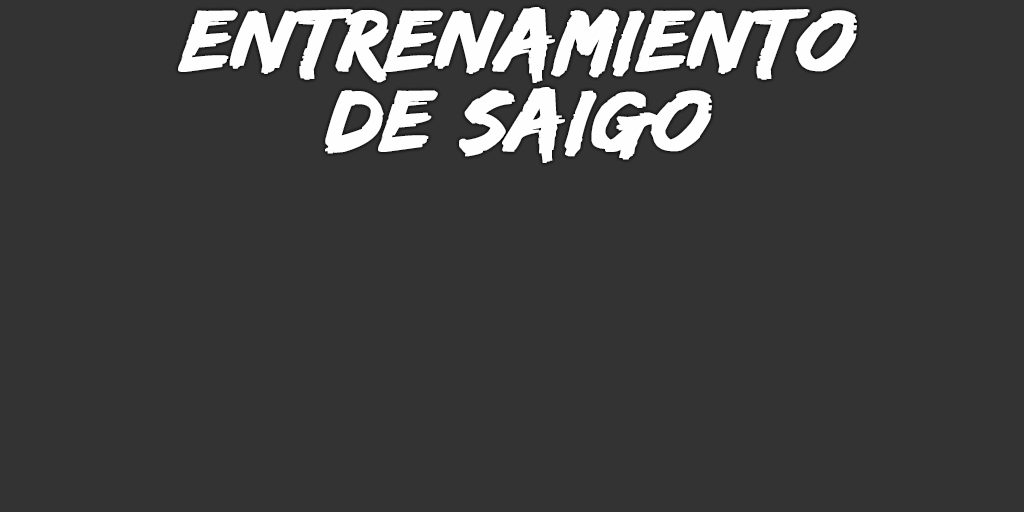
<style>
.page{position:relative;width:1024px;height:512px;background:#333333}
.page>*{position:absolute;margin:0}
.t1{font:90px/80px "EdoSZ";color:#fefefe;font-weight:bold;font-style:italic;scale:1.04 1}
</style>
<div class="page">
<p class="t1" style="left:178px;top:7px;width:679px;height:156px;text-align:center">entrenamiento<br>de saigo</p>
</div>
